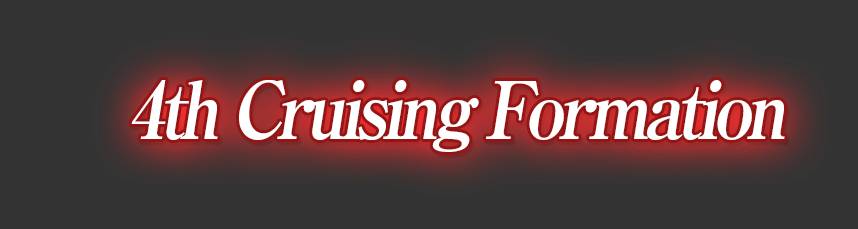
<style>
.page{position:relative;width:858px;height:229px;background:#333333}
.page>*{position:absolute;margin:0}
.t1{font:80px "RyuminPro-ExBold";letter-spacing:-0.08em;color:#ffffff;font-style:italic;scale:0.9 1}
</style>
<div class="page">
<p class="t1" style="left:131px;top:80px;width:654px;height:72px">4th Cruising Formation</p>
</div>
